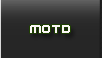
<style>
.page{position:relative;width:102px;height:58px;background:#262626}
.page>*{position:absolute;margin:0}
.t1{font:13px "Usuzi";color:#fbf6f6}
</style>
<div class="page">
<p class="t1" style="left:30px;top:25px;width:40px;height:8px">MOTD</p>
</div>
